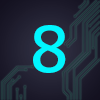
<style>
.page{position:relative;width:100px;height:100px}
.page>*{position:absolute;margin:0}
.t1{font:65px "Bitter-Regular";letter-spacing:0.13em;color:#00f6ff}
</style>
<div class="page">
<p class="t1" style="left:33px;top:25px;width:33px;height:48px">8</p>
</div>
